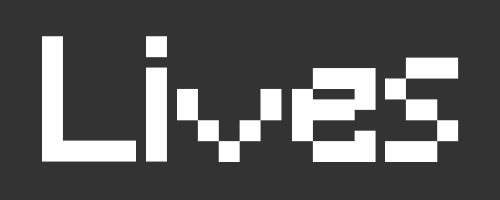
<style>
.page{position:relative;width:500px;height:200px;background:#333333}
.page>*{position:absolute;margin:0}
.t1{font:166.7px "Minecraft";color:#ffffff}
</style>
<div class="page">
<p class="t1" style="left:42px;top:36px;width:417px;height:126px">Lives</p>
</div>
